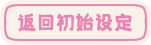
<style>
.page{position:relative;width:151px;height:45px;background:#f7f3e9}
.page>*{position:absolute;margin:0}
.t1{font:12px "shetumodengxiaofangti";color:#eb84b4;font-weight:bold;scale:0.94 1}
</style>
<div class="page">
<p class="t1" style="left:18px;top:13px;width:114px;height:19px">返回初始设定</p>
</div>
